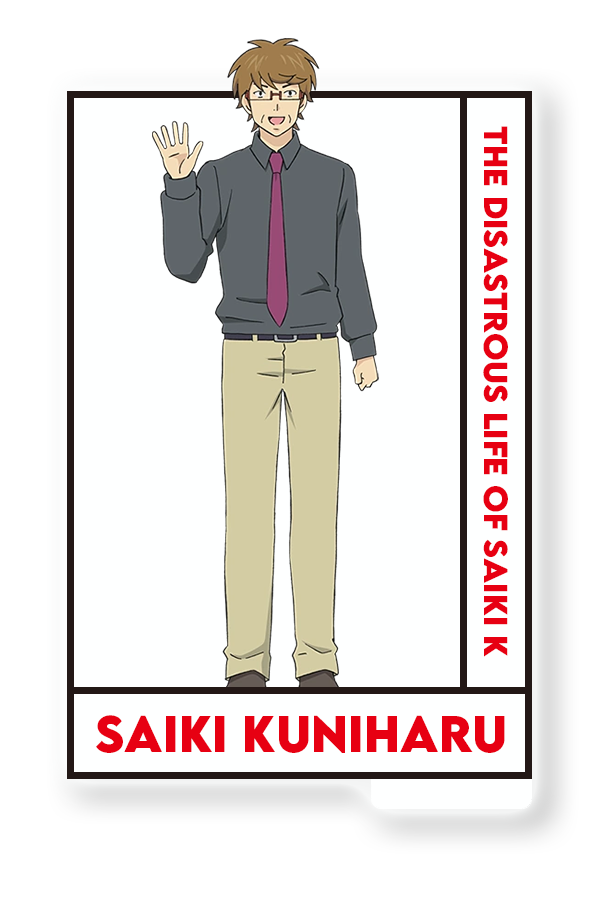
<style>
.page{position:relative;width:600px;height:900px;background:#feffff}
.page>*{position:absolute;margin:0}
.t1{font:29.6px "LEMONMILK-Bold";color:#e70012}
.t2{font:45.6px "LEMONMILK-Bold";color:#e70012}
</style>
<div class="page">
<p class="t1" style="left:483px;top:126px;width:25px;height:531px;rotate:90deg">THE disastrous Life of saiki K</p>
<p class="t2" style="left:96px;top:715px;width:409px;height:38px">Saiki Kuniharu</p>
</div>
